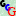
<style>
.page{position:relative;width:16px;height:16px}
.page>*{position:absolute;margin:0}
.t1{font:10px "Bauhaus93";color:#000000}
.t2{font:10px "Bauhaus93";color:#0c00ff}
.t3{font:12px "TimesNewRomanPSMT";color:#ff0000}
</style>
<div class="page">
<p class="t1" style="left:0px;top:0px;width:6px;height:7px">G</p>
<p class="t2" style="left:4px;top:4px;width:7px;height:7px">G</p>
<p class="t3" style="left:7px;top:7px;width:10px;height:9px">G</p>
</div>
